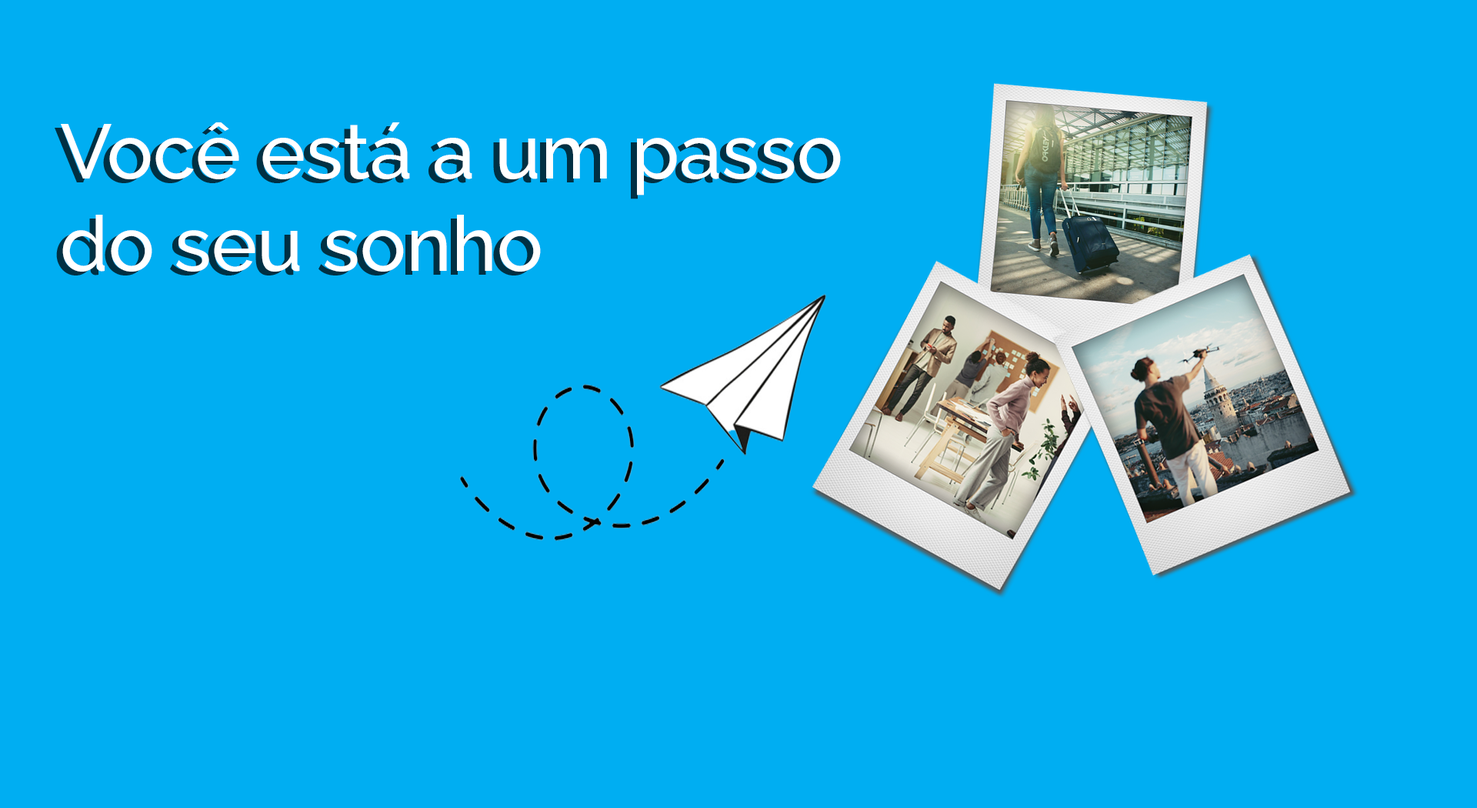
<style>
.page{position:relative;width:1477px;height:808px;background:#00aef2}
.page>*{position:absolute;margin:0}
.t1{font:76.9px "Raleway-Medium";color:#ffffff}
</style>
<div class="page">
<p class="t1" style="left:61px;top:122px;width:780px;height:149px">Você está a um passo do seu sonho</p>
</div>
